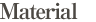
<style>
.page{position:relative;width:96px;height:22px;background:#ffffff}
.page>*{position:absolute;margin:0}
.t1{font:22px "RyuminPro-ExBold";letter-spacing:-0.08em;color:#4c4843}
</style>
<div class="page">
<p class="t1" style="left:0px;top:2px;width:78px;height:18px">Material</p>
</div>
